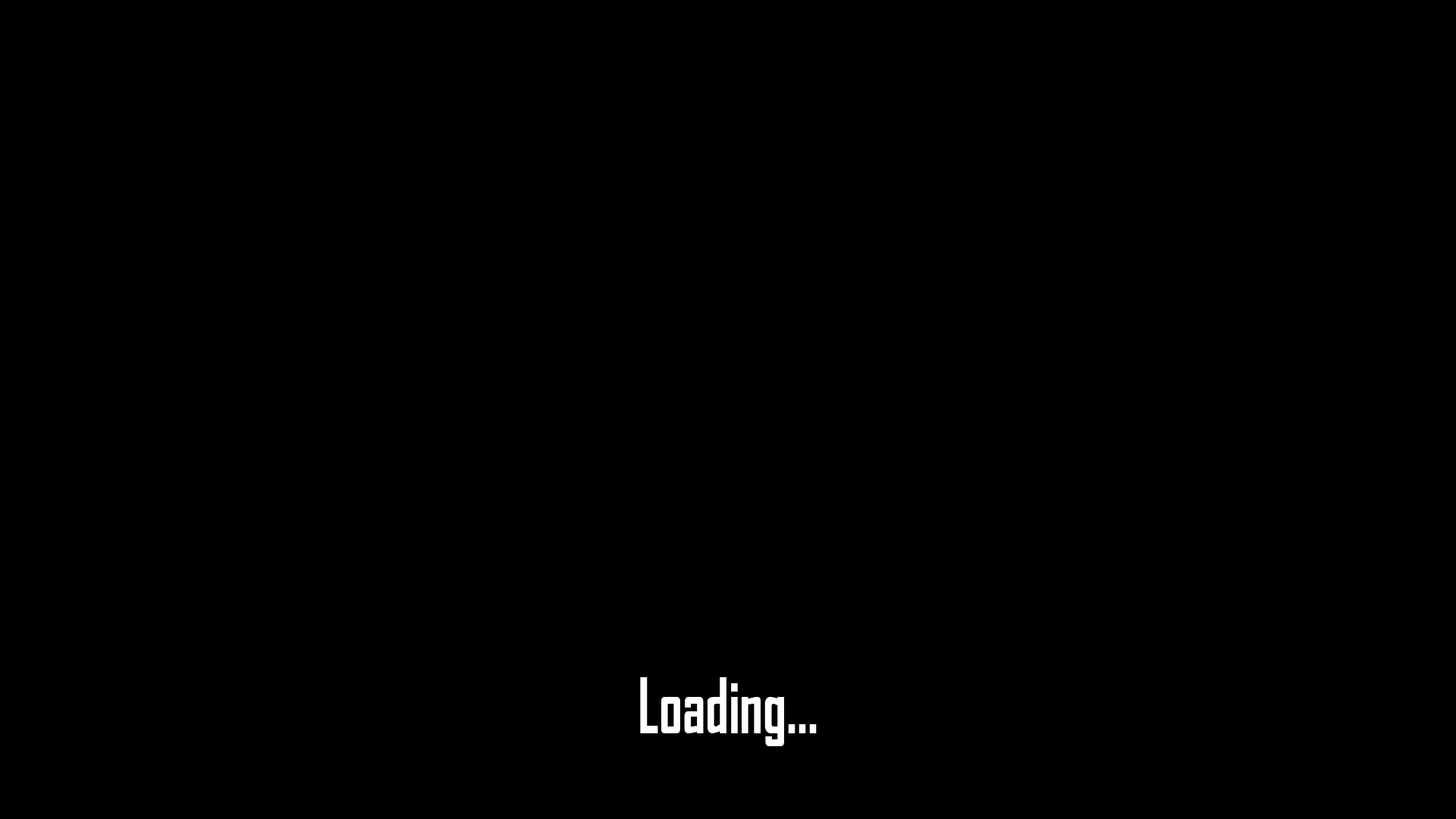
<style>
.page{position:relative;width:1456px;height:819px;background:#000000}
.page>*{position:absolute;margin:0}
.t1{font:73.7px "AgencyFB-Bold";color:#ffffff;scale:0.78 1}
</style>
<div class="page">
<p class="t1" style="left:640px;top:677px;width:177px;height:69px">Loading...</p>
</div>
